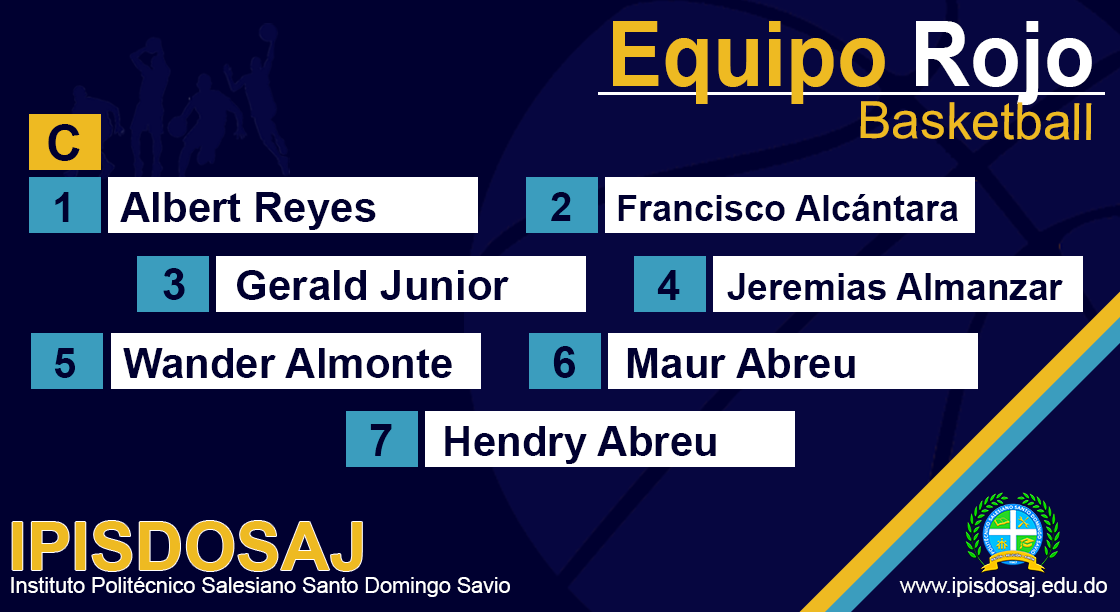
<style>
.page{position:relative;width:1120px;height:612px;background:#000030}
.page>*{position:absolute;margin:0}
.t1{font:90.9px "Arial-BoldMT";color:#eeba22;scale:0.91 1}
.t2{font:90.9px "Arial-BoldMT";color:#ffffff;scale:0.91 1}
.t3{font:51.4px "ArialMT";color:#eeba22}
.t4{font:50px "Arial-BoldMT";color:#000030}
.t5{font:42px "Arial-BoldMT";color:#000030}
.t6{font:36px "Arial-BoldMT";color:#000030}
.t7{font:40px "Arial-BoldMT";color:#000030}
.t8{font:44.3px "Arial-BoldMT";color:#000030}
.t9{font:37px "Arial-BoldMT";color:#000030}
.t10{font:67.3px "Arial-BoldMT";color:#eeba22}
.t11{font:21.6px "ArialMT";color:#ffffff}
</style>
<div class="page">
<p class="t1" style="left:613px;top:21px;width:479px;height:84px">Equipo <span class="t2">Rojo</span></p>
<p class="t3" style="left:860px;top:101px;width:232px;height:39px">Basketball</p>
<p class="t4" style="left:48px;top:124px;width:32px;height:37px">C</p>
<p class="t5" style="left:55px;top:192px;width:321px;height:38px">1    Albert Reyes</p>
<p class="t6" style="left:551px;top:192px;width:407px;height:29px"><span class="t7">2    </span>Francisco Alcántara</p>
<p class="t5" style="left:163px;top:268px;width:346px;height:32px"><span class="t8">3    </span>Gerald Junior</p>
<p class="t9" style="left:657px;top:270px;width:406px;height:30px"><span class="t5">4    </span>Jeremias Almanzar</p>
<p class="t5" style="left:54px;top:348px;width:398px;height:30px">5    Wander Almonte</p>
<p class="t5" style="left:553px;top:346px;width:302px;height:32px"><span class="t8">6    </span>Maur Abreu</p>
<p class="t5" style="left:370px;top:424px;width:346px;height:40px"><span class="t8">7    </span>Hendry Abreu</p>
<p class="t10" style="left:12px;top:521px;width:350px;height:50px">IPISDOSAJ</p>
<p class="t11" style="left:11px;top:577px;width:1096px;height:20px">Instituto Politécnico Salesiano Santo Domingo Savio                                                                 www.ipisdosaj.edu.do</p>
</div>
